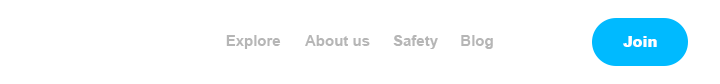
<style>
.page{position:relative;width:720px;height:84px;background:#ffffff}
.page>*{position:absolute;margin:0}
.t1{font:15px "Arial-BoldMT";color:#b6b6b6}
.t2{font:15px "Arial-Black";color:#ffffff}
</style>
<div class="page">
<p class="t1" style="left:226px;top:35px;width:55px;height:14px">Explore</p>
<p class="t1" style="left:305px;top:35px;width:65px;height:11px">About us</p>
<p class="t1" style="left:393px;top:35px;width:45px;height:14px">Safety</p>
<p class="t1" style="left:461px;top:35px;width:32px;height:14px">Blog</p>
<p class="t2" style="left:623px;top:36px;width:34px;height:11px">Join</p>
</div>
